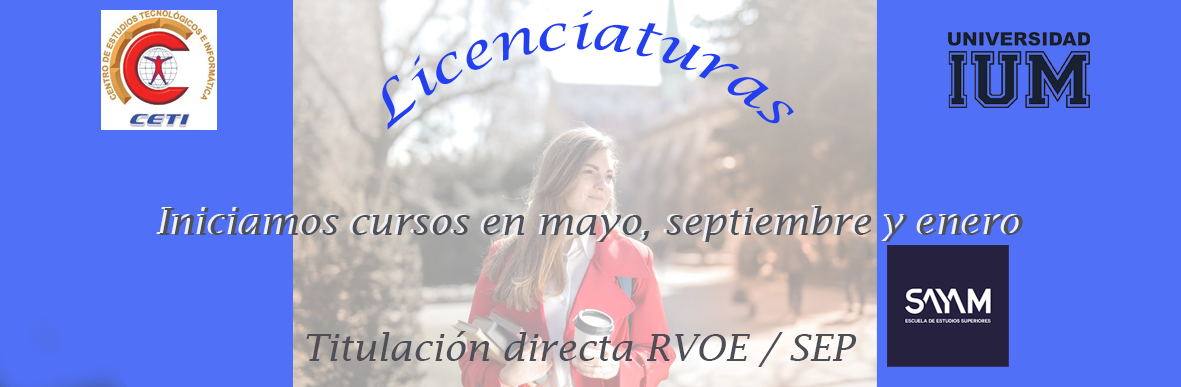
<style>
.page{position:relative;width:1181px;height:387px;background:#5070f7}
.page>*{position:absolute;margin:0}
.t1{font:50px "LucidaCalligraphy-Italic";color:#2340f0}
.t2{font:37.5px "LucidaFax-Italic";color:#4f5158}
.t3{font:37.5px "LucidaFax-Italic";color:#4d4e56}
</style>
<div class="page">
<p class="t1" style="left:382px;top:9px;width:412px;height:121px">Licenciaturas</p>
<p class="t2" style="left:159px;top:206px;width:864px;height:36px">Iniciamos cursos en mayo, septiembre y enero</p>
<p class="t3" style="left:306px;top:331px;width:551px;height:36px">Titulación directa RVOE / SEP</p>
</div>
